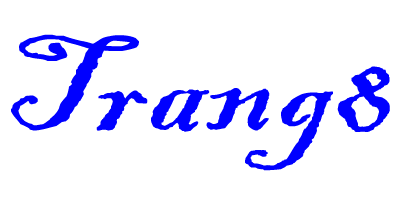
<style>
.page{position:relative;width:400px;height:200px;background:#ffffff}
.page>*{position:absolute;margin:0}
.t1{font:141.7px "BlackadderITC-Regular";color:#0000ff;scale:1.18 1}
</style>
<div class="page">
<p class="t1" style="left:11px;top:34px;width:379px;height:137px">Trang8</p>
</div>
